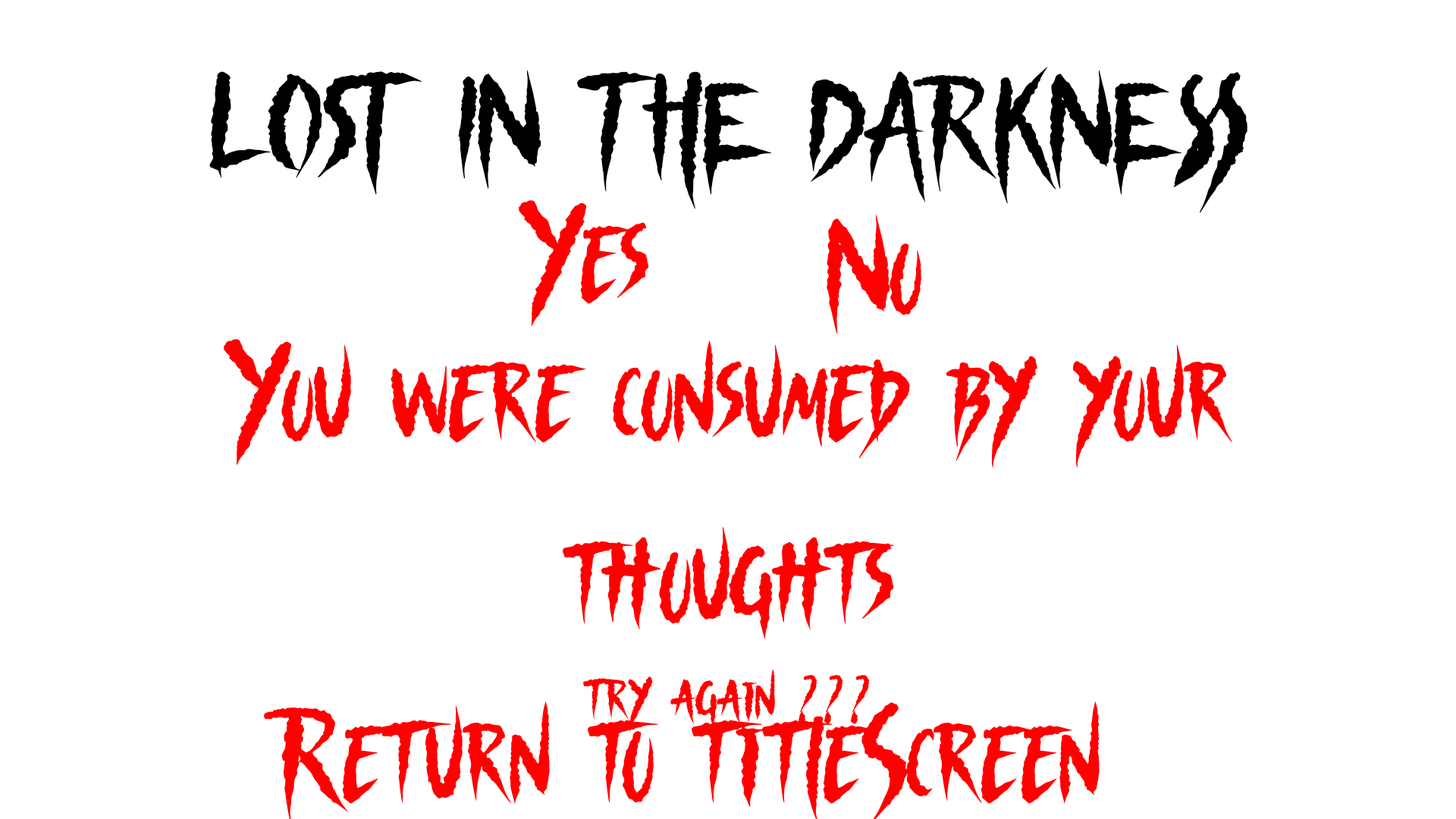
<style>
.page{position:relative;width:1456px;height:819px;background:#ffffff}
.page>*{position:absolute;margin:0}
.t1{font:151.7px "NightscaryFreeTrial";color:#000000}
.t2{font:151.7px "NightscaryFreeTrial";color:#ff0000}
.t3{font:75.8px "NightscaryFreeTrial";color:#ff0000}
</style>
<div class="page">
<p class="t1" style="left:209px;top:67px;width:1038px;height:146px">LOST IN THE DARKNESS</p>
<p class="t1" style="left:209px;top:67px;width:1038px;height:146px">LOST IN THE DARKNESS</p>
<p class="t2" style="left:519px;top:200px;width:130px;height:127px">Yes</p>
<p class="t2" style="left:827px;top:215px;width:94px;height:119px">No</p>
<p class="t2" style="left:224px;top:339px;width:1008px;height:394px;text-align:center">You were consumed by your thoughts<br><span class="t3">try again ???</span></p>
</div>
